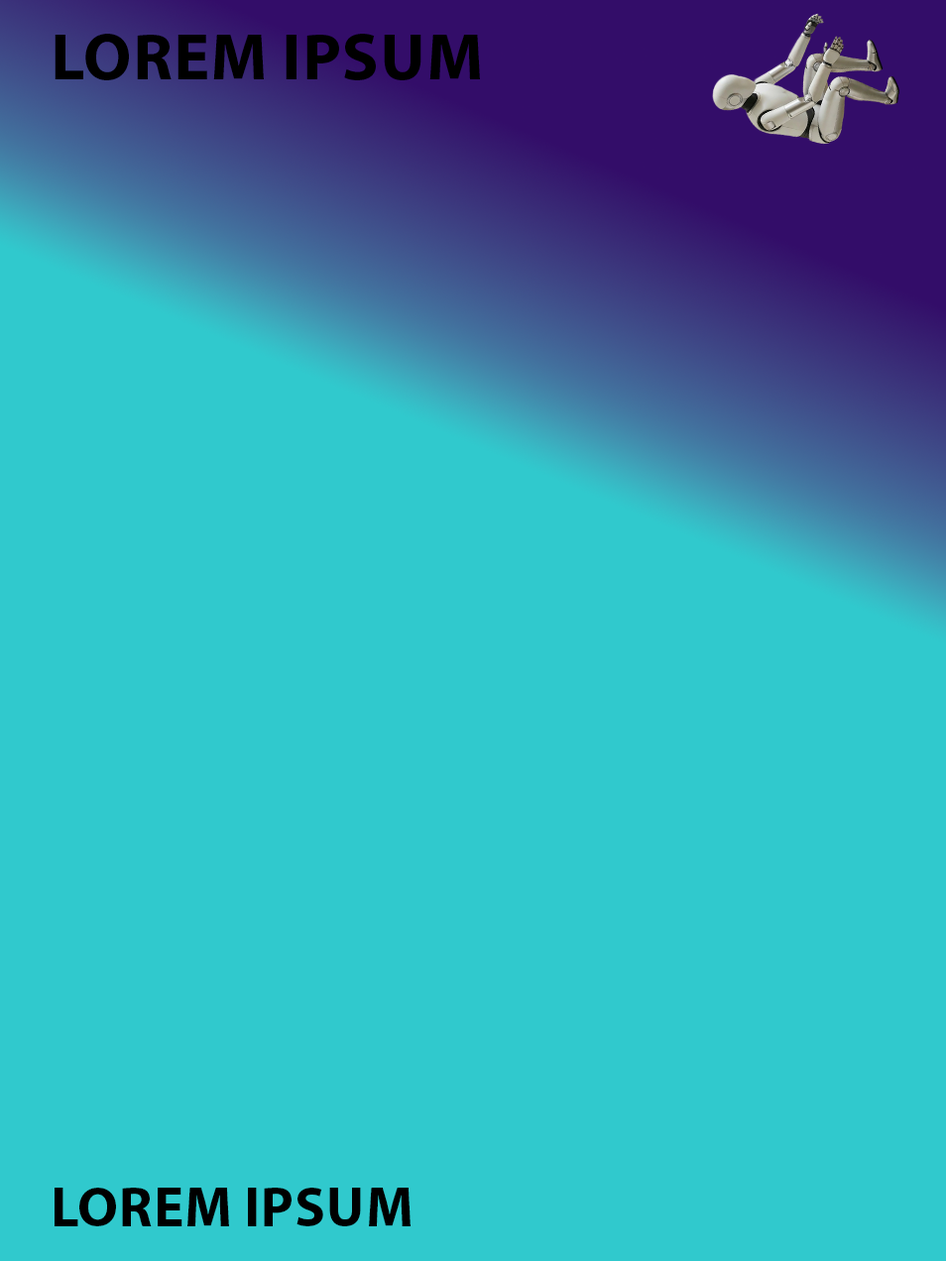
<style>
.page{position:relative;width:946px;height:1261px;background:#30c9cd}
.page>*{position:absolute;margin:0}
.t1{font:66.8px "MyriadPro-Bold";color:#000000;text-transform:uppercase}
.t2{font:56px "MyriadPro-Bold";color:#000000;text-transform:uppercase}
</style>
<div class="page">
<p class="t1" style="left:55px;top:34px;width:425px;height:46px">Lorem Ipsum</p>
<p class="t2" style="left:55px;top:1188px;width:355px;height:38px">Lorem Ipsum</p>
</div>
